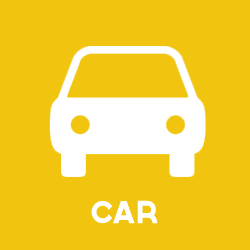
<style>
.page{position:relative;width:250px;height:250px;background:#f1c40f}
.page>*{position:absolute;margin:0}
.t1{font:30px "Governor";color:#ffffff}
</style>
<div class="page">
<p class="t1" style="left:91px;top:200px;width:67px;height:24px">CAR</p>
</div>
